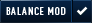
<style>
.page{position:relative;width:92px;height:23px}
.page>*{position:absolute;margin:0}
.t1{font:11px "AdiHausPSCon-Md";letter-spacing:0.08em;color:#ffffff}
</style>
<div class="page">
<p class="t1" style="left:6px;top:7px;width:60px;height:8px">BALANCE MOD</p>
</div>
